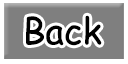
<style>
.page{position:relative;width:128px;height:64px;background:#7f7f7f}
.page>*{position:absolute;margin:0}
.t1{font:36px "ComicSansMS";color:#000000}
</style>
<div class="page">
<p class="t1" style="left:26px;top:15px;width:76px;height:31px">Back</p>
</div>
